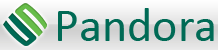
<style>
.page{position:relative;width:218px;height:50px}
.page>*{position:absolute;margin:0}
.t1{font:48px "Calibri";color:#006a55}
</style>
<div class="page">
<p class="t1" style="left:58px;top:8px;width:156px;height:33px">Pandora</p>
</div>
